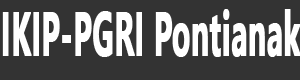
<style>
.page{position:relative;width:300px;height:80px;background:#333333}
.page>*{position:absolute;margin:0}
.t1{font:62.5px "SegoeUI-Bold";color:#ffffff;font-weight:bold;scale:0.48 1}
</style>
<div class="page">
<p class="t1" style="left:2px;top:9px;width:299px;height:48px">IKIP-PGRI Pontianak</p>
</div>
